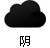
<style>
.page{position:relative;width:50px;height:48px;background:#ffffff}
.page>*{position:absolute;margin:0}
.t1{font:12px "OPPOSans-R";color:#000000}
</style>
<div class="page">
<p class="t1" style="left:20px;top:36px;width:10px;height:11px">阴</p>
</div>
